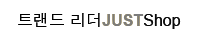
<style>
.page{position:relative;width:200px;height:40px;background:#ffffff}
.page>*{position:absolute;margin:0}
.t1{font:16px "Dotum";color:#000000}
.t2{font:16px "Arial-BoldMT";color:#e6bc13}
.t3{font:16px "ArialMT";color:#0b0b0b}
</style>
<div class="page">
<p class="t1" style="left:18px;top:13px;width:163px;height:16px">트랜드 리더<span class="t2">JUST</span><span class="t3">Shop</span></p>
</div>
